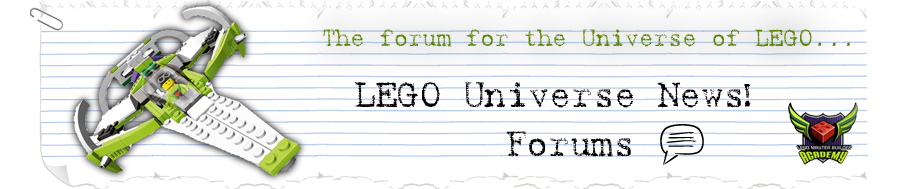
<style>
.page{position:relative;width:900px;height:189px;background:#ffffff}
.page>*{position:absolute;margin:0}
.t1{font:23.9px "BatikRegular";color:#5c8300}
.t2{font:35.9px "BatikRegular";color:#000000}
</style>
<div class="page">
<p class="t1" style="left:323px;top:29px;width:527px;height:18px">The forum for the Universe of LEGO...</p>
<p class="t2" style="left:354px;top:82px;width:397px;height:26px">LEGO Universe News!</p>
<p class="t2" style="left:506px;top:131px;width:125px;height:26px">Forums</p>
</div>
